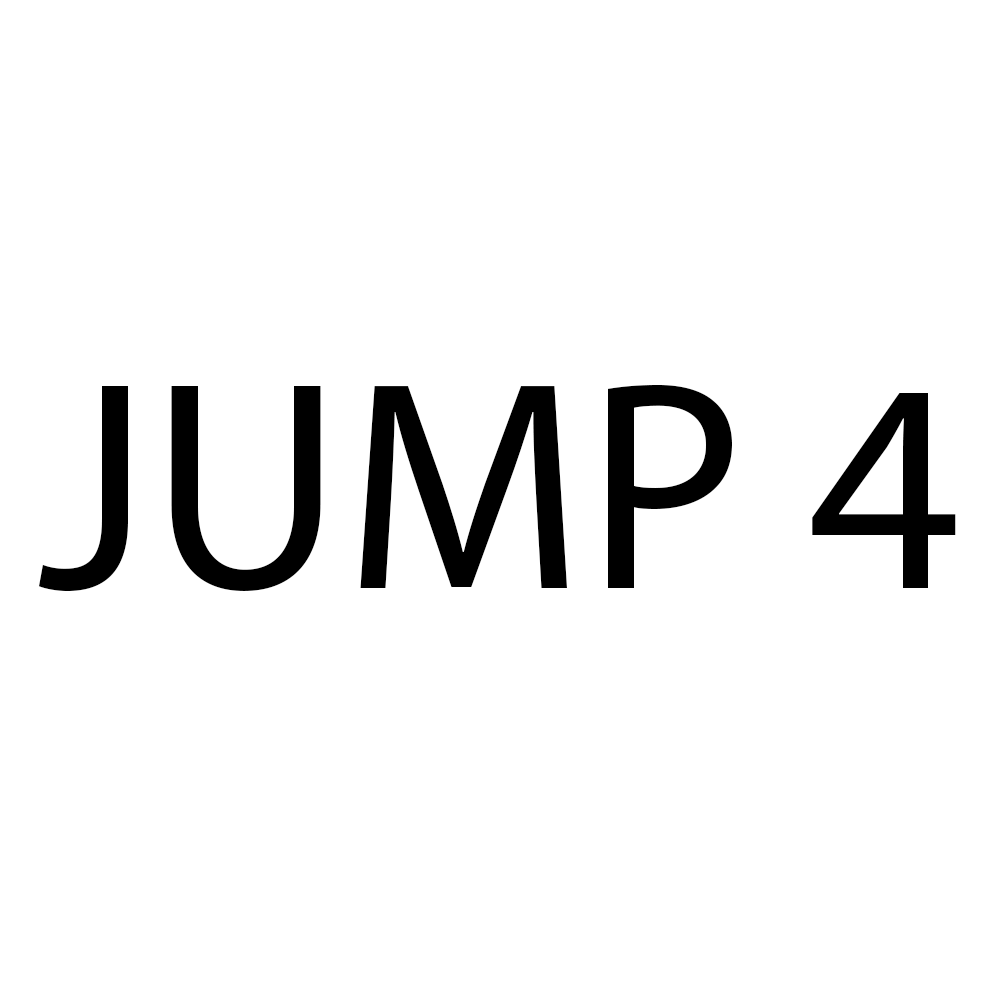
<style>
.page{position:relative;width:1000px;height:1000px;background:#ffffff}
.page>*{position:absolute;margin:0}
.t1{font:300px "MyriadPro-Regular";color:#000000}
</style>
<div class="page">
<p class="t1" style="left:39px;top:385px;width:917px;height:207px">JUMP 4</p>
</div>
